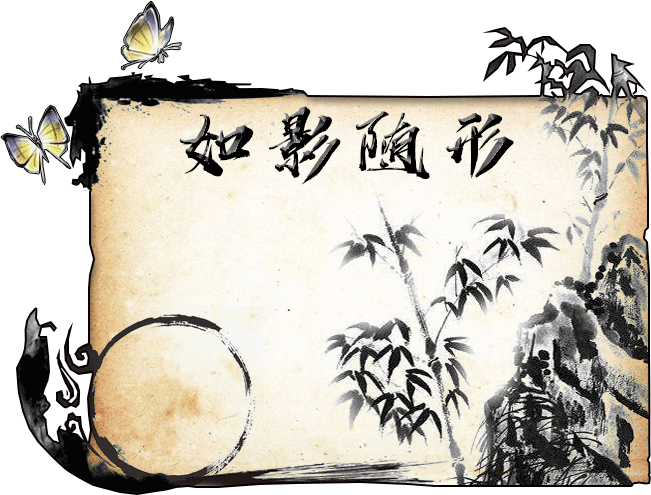
<style>
.page{position:relative;width:651px;height:495px;background:#ffffff}
.page>*{position:absolute;margin:0}
.t1{font:79.7px "HYQinChuanFeiYingW";letter-spacing:0.1em;color:#000000}
</style>
<div class="page">
<p class="t1" style="left:179px;top:106px;width:335px;height:79px">如影随形</p>
</div>
